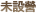
<style>
.page{position:relative;width:38px;height:15px;background:#ffffff}
.page>*{position:absolute;margin:0}
.t1{font:12px "GothicMB101Pr6N-Medium";font-weight:bold}
</style>
<div class="page">
<p class="t1" style="left:0px;top:0px;width:36px;height:13px">未設營</p>
</div>
